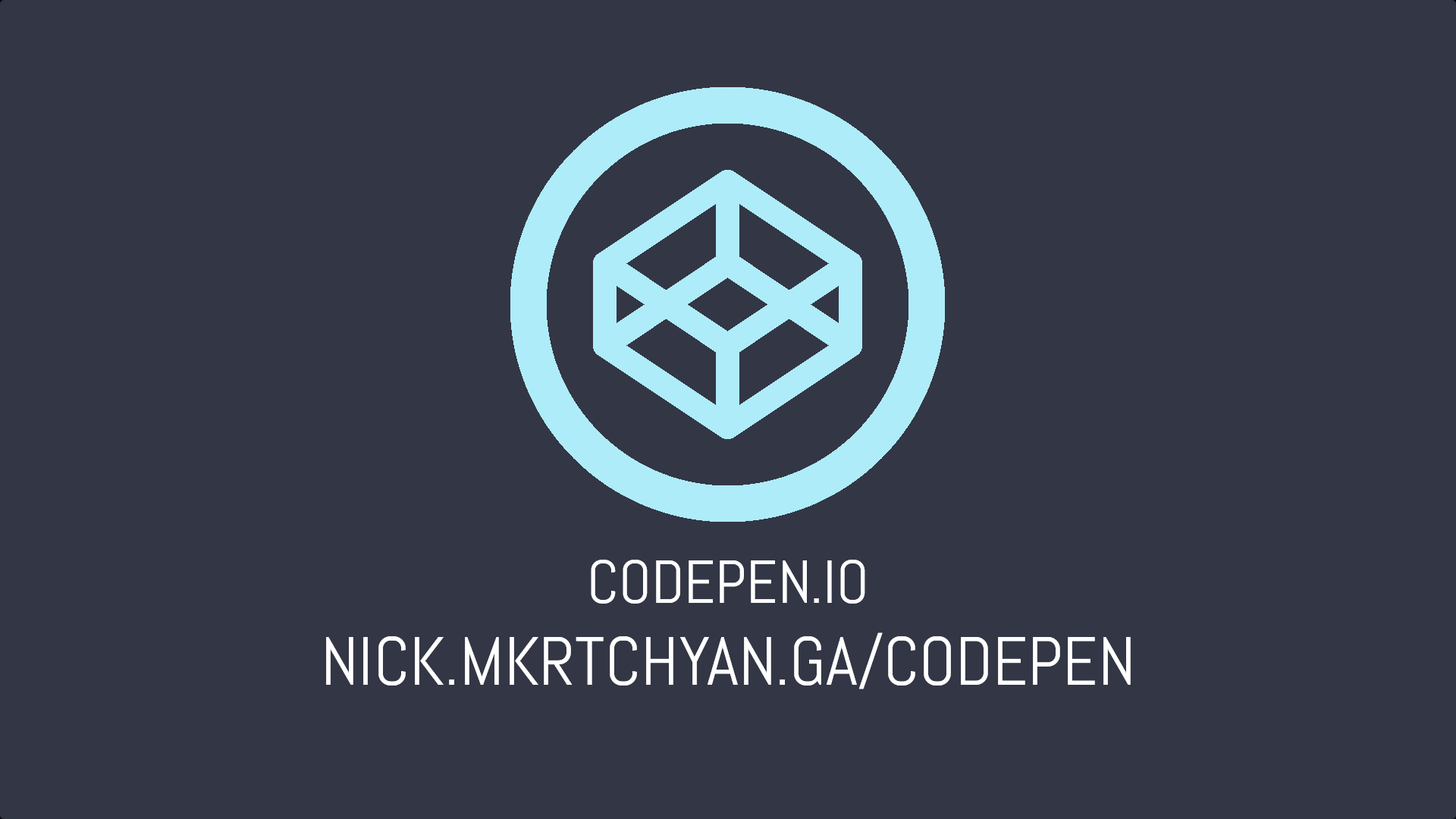
<style>
.page{position:relative;width:1456px;height:819px;background:#333645}
.page>*{position:absolute;margin:0}
.t1{font:68.2px "Abel-Regular";color:#ffffff}
.t2{font:60.7px "Abel-Regular";color:#ffffff}
</style>
<div class="page">
<p class="t1" style="left:326px;top:560px;width:805px;height:129px;text-align:center"><span class="t2">CODEPEN.IO<br></span>NICK.MKRTCHYAN.GA/CODEPEN</p>
</div>
